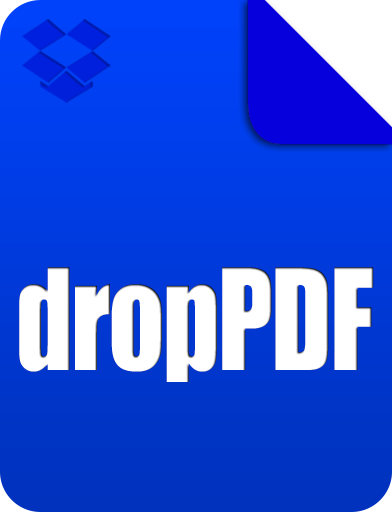
<style>
.page{position:relative;width:392px;height:512px}
.page>*{position:absolute;margin:0}
.t1{font:130px "Impact";letter-spacing:-0.02em;color:#ffffff;scale:0.85 1}
</style>
<div class="page">
<p class="t1" style="left:19px;top:267px;width:355px;height:115px">dropPDF</p>
</div>
